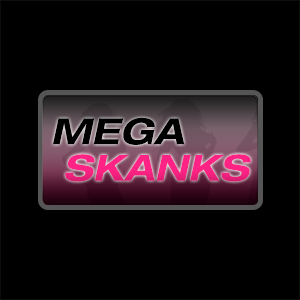
<style>
.page{position:relative;width:300px;height:300px;background:#000000}
.page>*{position:absolute;margin:0}
.t1{font:36px "Helvetica73-ExtendBoldObl";letter-spacing:0.005em;color:#000000}
.t2{font:36px "Helvetica73-ExtendBoldObl";letter-spacing:0.005em;color:#ff2385}
</style>
<div class="page">
<p class="t1" style="left:53px;top:117px;width:132px;height:28px">MEGA</p>
<p class="t2" style="left:65px;top:154px;width:186px;height:28px">SKANKS</p>
</div>
